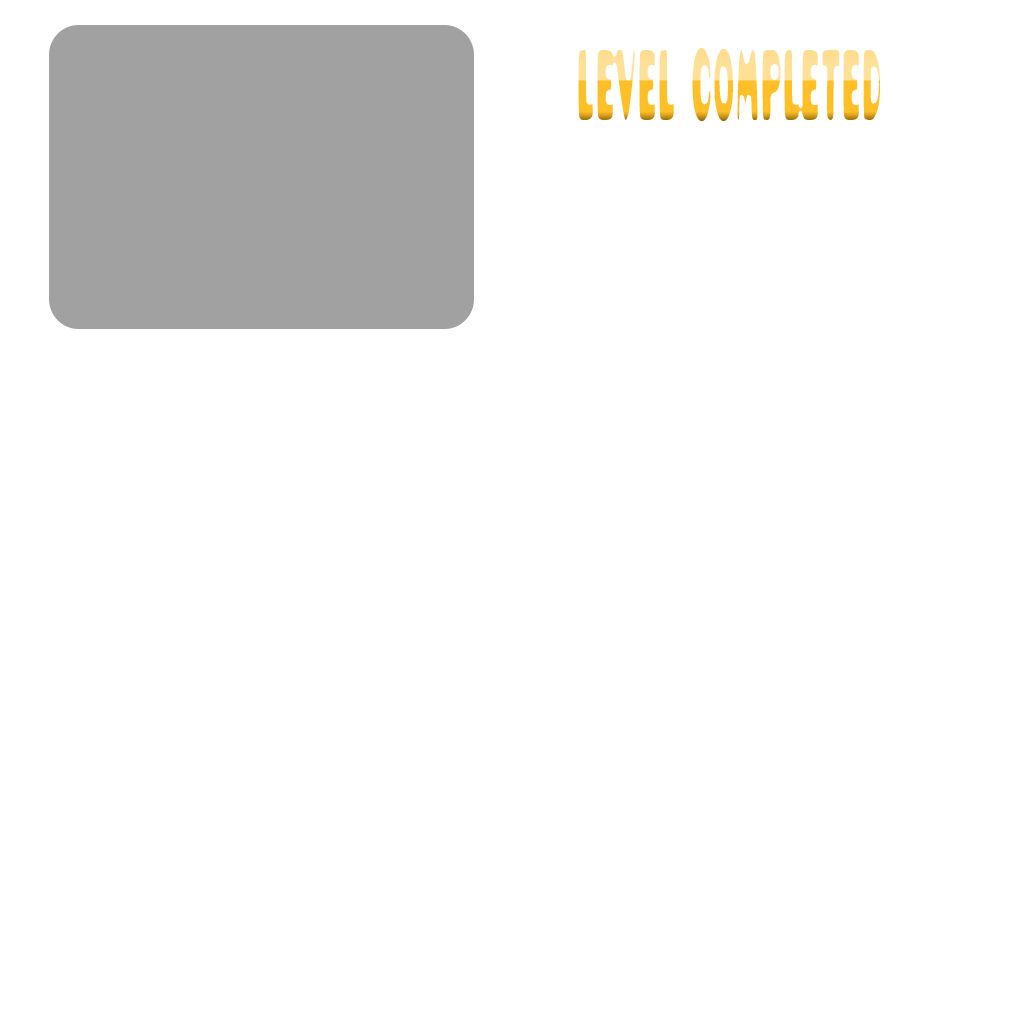
<style>
.page{position:relative;width:1024px;height:1024px;background:#ffffff}
.page>*{position:absolute;margin:0}
.t1{font:113.6px "Pusab";letter-spacing:-0.02em;scale:0.28 1}
</style>
<div class="page">
<p class="t1" style="left:576px;top:46px;width:306px;height:78px">LEVEL COMPLETED</p>
</div>
